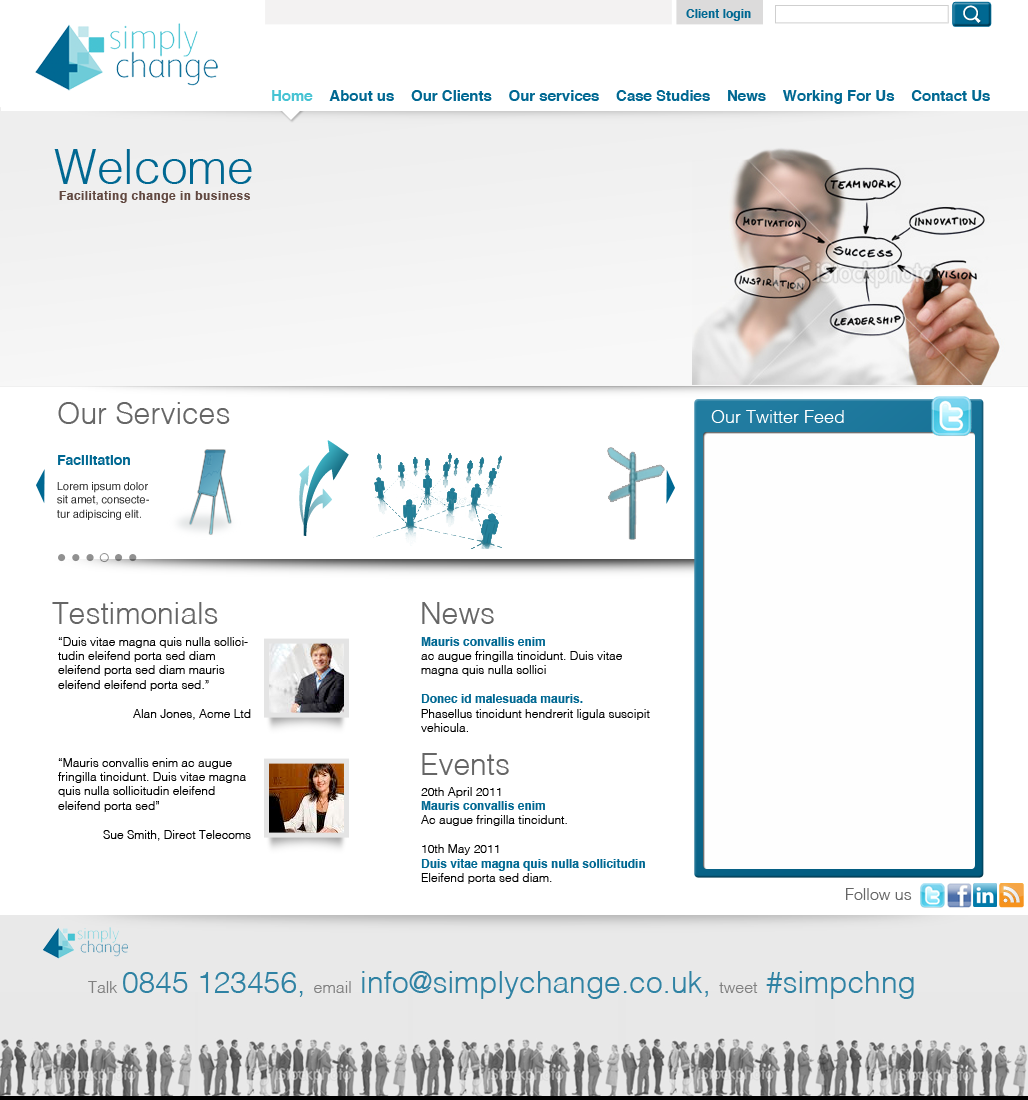
<style>
.page{position:relative;width:1028px;height:1100px;background:#ffffff}
.page>*{position:absolute;margin:0}
.t1{font:12px "Helvetica-Bold";color:#006892}
.t2{font:15px "Helvetica-Bold";color:#006892}
.t3{font:15px "Helvetica-Bold";color:#46c3d3}
.t4{font:48px "Helvetica-Light";color:#006792}
.t5{font:12px "Helvetica-Bold";letter-spacing:0.037em;color:#614840}
.t6{font:30px "Helvetica-Light";color:#666666}
.t7{font:18px "Helvetica-Light";color:#ffffff}
.t8{font:14px "Helvetica-Bold";color:#006892}
.t9{font:11px "Helvetica";color:#2f2f2f}
.t10{font:12px "Helvetica-Light";color:#000000}
.t11{font:16px "Helvetica-Light";color:#666666}
.t12{font:30px "Helvetica-Light";color:#2f82a3}
.t13{font:16px "Helvetica-Light";color:#2f82a3}
</style>
<div class="page">
<p class="t1" style="left:686px;top:9px;width:65px;height:12px">Client login</p>
<p class="t2" style="left:272px;top:90px;width:718px;height:14px"><span class="t3">Home    </span>About us    Our Clients    Our services    Case Studies    News    Working For Us    Contact Us</p>
<p class="t4" style="left:54px;top:149px;width:198px;height:35px">Welcome</p>
<p class="t5" style="left:59px;top:191px;width:191px;height:12px">Facilitating change in business</p>
<p class="t6" style="left:58px;top:402px;width:172px;height:22px">Our Services</p>
<p class="t7" style="left:711px;top:410px;width:133px;height:13px">Our Twitter Feed</p>
<p class="t8" style="left:58px;top:455px;width:72px;height:10px">Facilitation</p>
<p class="t9" style="left:57px;top:482px;width:92px;height:38px">Lorem ipsum dolor sit amet, consectetur adipiscing elit.</p>
<p class="t6" style="left:52px;top:602px;width:166px;height:22px">Testimonials</p>
<p class="t6" style="left:422px;top:602px;width:72px;height:22px">News</p>
<p class="t10" style="left:58px;top:637px;width:193px;height:83px">“Duis vitae magna quis nulla sollicitudin eleifend porta sed diam eleifend porta sed diam mauris eleifend eleifend porta sed.”<br><br>Alan Jones, Acme Ltd</p>
<p class="t10" style="left:421px;top:637px;width:229px;height:95px"><span class="t1">Mauris convallis enim <br></span>ac augue fringilla tincidunt. Duis vitae magna quis nulla sollici<br><br><span class="t1">Donec id malesuada mauris.</span> <br>Phasellus tincidunt hendrerit ligula suscipit vehicula.</p>
<p class="t10" style="left:58px;top:758px;width:193px;height:83px">“Mauris convallis enim ac augue fringilla tincidunt. Duis vitae magna quis nulla sollicitudin eleifend eleifend porta sed”<br><br>Sue Smith, Direct Telecoms</p>
<p class="t6" style="left:422px;top:753px;width:87px;height:22px">Events</p>
<p class="t10" style="left:421px;top:787px;width:224px;height:97px">20th April 2011<br><span class="t1">Mauris convallis enim <br></span>Ac augue fringilla tincidunt. <br><br>10th May 2011<br><span class="t1">Duis vitae magna quis nulla sollicitudin</span> Eleifend porta sed diam.</p>
<p class="t11" style="left:846px;top:888px;width:66px;height:12px">Follow us</p>
<p class="t12" style="left:88px;top:971px;width:826px;height:28px"><span class="t13">Talk </span>0845 123456, <span class="t13">email</span> info@simplychange.co.uk, <span class="t13">tweet</span> #simpchng</p>
</div>
